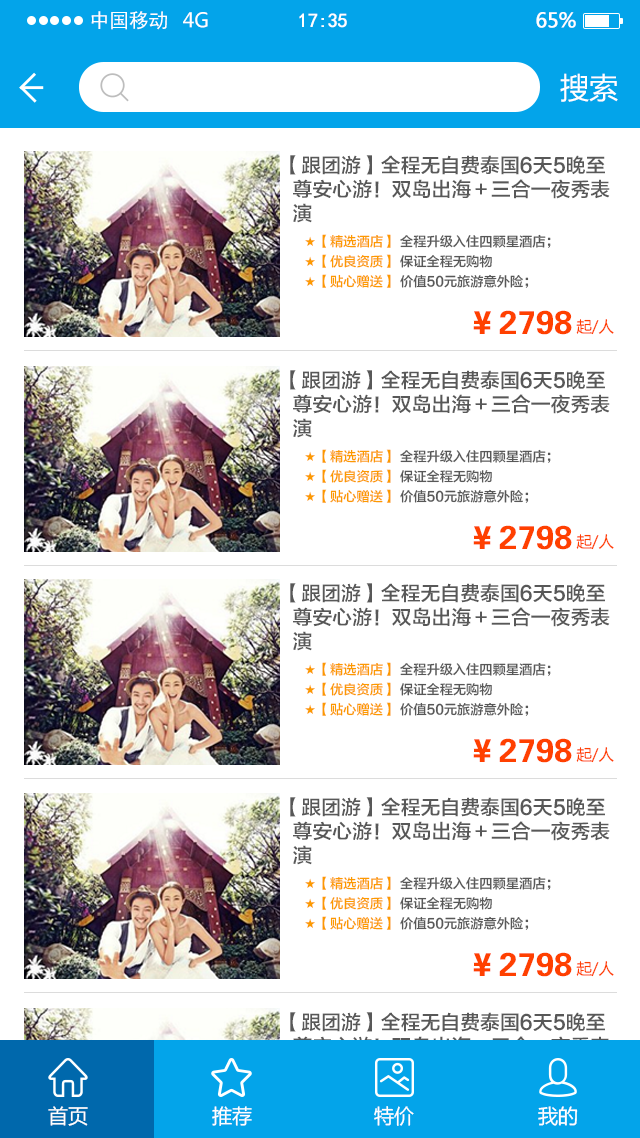
<style>
.page{position:relative;width:640px;height:1138px;background:#ffffff}
.page>*{position:absolute;margin:0}
.t1{font:19.7px "SimHei";color:#ffffff}
.t2{font:19.7px "MicrosoftYaHei";color:#ffffff}
.t3{font:19.7px "SimHei";letter-spacing:-0.022em;color:#ffffff;font-weight:bold}
.t4{font:19.7px "MicrosoftYaHei";letter-spacing:-0.022em;color:#ffffff;font-weight:bold}
.t5{font:29.1px "MicrosoftYaHei";color:#ffffff}
.t6{font:19.9px/24.3px "FZLTZHK--GBK1-0";color:#585858}
.t7{font:13.2px/19.9px "FZLTZHK--GBK1-0";color:#585858}
.t8{font:13.2px/19.9px "FZLTZHK--GBK1-0";color:#fc9a00}
.t9{font:33.1px "FZDHTK--GBK1-0";color:#ff4000}
.t10{font:15.4px "MicrosoftYaHei";color:#ff4000}
.t11{font:20px "MicrosoftYaHei";color:#ffffff}
</style>
<div class="page">
<p class="t1" style="left:91px;top:11px;width:76px;height:19px">中国移动</p>
<p class="t2" style="left:183px;top:12px;width:25px;height:16px">4G</p>
<p class="t3" style="left:299px;top:13px;width:48px;height:15px">17:35</p>
<p class="t4" style="left:536px;top:12px;width:40px;height:16px">65%</p>
<p class="t5" style="left:560px;top:73px;width:58px;height:29px">搜索</p>
<p class="t6" style="left:290px;top:155px;width:320px;height:68px">【跟团游】全程无自费泰国6天5晚至<br>  尊安心游！双岛出海＋三合一夜秀表<br>  演</p>
<p class="t7" style="left:305px;top:234px;width:246px;height:54px"><span class="t8">★【精选酒店】</span> 全程升级入住四颗星酒店；<br><span class="t8">★【优良资质】</span> 保证全程无购物<br><span class="t8">★【贴心赠送】</span> 价值50元旅游意外险；</p>
<p class="t9" style="left:473px;top:310px;width:99px;height:25px">￥2798</p>
<p class="t10" style="left:576px;top:319px;width:38px;height:16px">起/人</p>
<p class="t6" style="left:290px;top:370px;width:320px;height:68px">【跟团游】全程无自费泰国6天5晚至<br>  尊安心游！双岛出海＋三合一夜秀表<br>  演</p>
<p class="t7" style="left:305px;top:449px;width:246px;height:54px"><span class="t8">★【精选酒店】</span> 全程升级入住四颗星酒店；<br><span class="t8">★【优良资质】</span> 保证全程无购物<br><span class="t8">★【贴心赠送】</span> 价值50元旅游意外险；</p>
<p class="t9" style="left:473px;top:525px;width:99px;height:25px">￥2798</p>
<p class="t10" style="left:576px;top:534px;width:38px;height:16px">起/人</p>
<p class="t6" style="left:290px;top:583px;width:320px;height:68px">【跟团游】全程无自费泰国6天5晚至<br>  尊安心游！双岛出海＋三合一夜秀表<br>  演</p>
<p class="t7" style="left:305px;top:662px;width:246px;height:54px"><span class="t8">★【精选酒店】</span> 全程升级入住四颗星酒店；<br><span class="t8">★【优良资质】</span> 保证全程无购物<br><span class="t8">★【贴心赠送】</span> 价值50元旅游意外险；</p>
<p class="t9" style="left:473px;top:738px;width:99px;height:25px">￥2798</p>
<p class="t10" style="left:576px;top:747px;width:38px;height:16px">起/人</p>
<p class="t6" style="left:290px;top:797px;width:320px;height:68px">【跟团游】全程无自费泰国6天5晚至<br>  尊安心游！双岛出海＋三合一夜秀表<br>  演</p>
<p class="t7" style="left:305px;top:876px;width:246px;height:54px"><span class="t8">★【精选酒店】</span> 全程升级入住四颗星酒店；<br><span class="t8">★【优良资质】</span> 保证全程无购物<br><span class="t8">★【贴心赠送】</span> 价值50元旅游意外险；</p>
<p class="t9" style="left:473px;top:952px;width:99px;height:25px">￥2798</p>
<p class="t10" style="left:576px;top:961px;width:38px;height:16px">起/人</p>
<p class="t6" style="left:290px;top:1012px;width:320px;height:68px">【跟团游】全程无自费泰国6天5晚至<br>  尊安心游！双岛出海＋三合一夜秀表<br>  演</p>
<p class="t11" style="left:48px;top:1106px;width:40px;height:20px">首页</p>
<p class="t11" style="left:212px;top:1106px;width:40px;height:20px">推荐</p>
<p class="t11" style="left:374px;top:1106px;width:40px;height:20px">特价</p>
<p class="t11" style="left:538px;top:1106px;width:40px;height:20px">我的</p>
</div>
